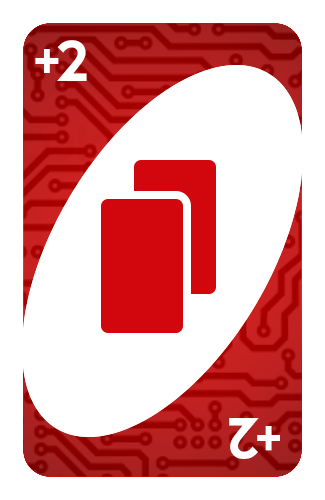
<style>
.page{position:relative;width:325px;height:500px;background:#ffffff}
.page>*{position:absolute;margin:0}
.t1{font:50px "KeepCalm-Medium";letter-spacing:0.1em;color:#ffffff;text-transform:uppercase}
.t2{font:40px "KeepCalm-Medium";letter-spacing:0.1em;color:#ffffff}
.t3{font:50.3px "KeepCalm-Medium";letter-spacing:0.1em;color:#ffffff;text-transform:uppercase}
.t4{font:40.2px "KeepCalm-Medium";letter-spacing:0.1em;color:#ffffff}
</style>
<div class="page">
<p class="t1" style="left:57px;top:40px;width:30px;height:41px"><span class="t2"> </span>2</p>
<p class="t2" style="left:35px;top:49px;width:24px;height:24px">+</p>
<p class="t3" style="left:229px;top:418px;width:30px;height:41px;rotate:180deg"><span class="t4"> </span>2</p>
<p class="t4" style="left:257px;top:426px;width:23px;height:25px;rotate:180deg">+</p>
</div>
